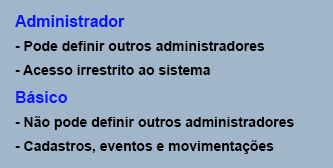
<style>
.page{position:relative;width:333px;height:168px;background:#a1b6ca}
.page>*{position:absolute;margin:0}
.t1{font:14px/24px "Arial-BoldMT";color:#000000}
.t2{font:16px/24px "Arial-BoldMT";color:#0416fd}
</style>
<div class="page">
<p class="t1" style="left:15px;top:15px;width:250px;height:60px"><span class="t2">Administrador<br></span>- Pode definir outros administradores<br>- Acesso irrestrito ao sistema</p>
<p class="t1" style="left:15px;top:91px;width:279px;height:63px"><span class="t2">Básico<br></span>- Não pode definir outros administradores<br>- Cadastros, eventos e movimentações</p>
</div>
